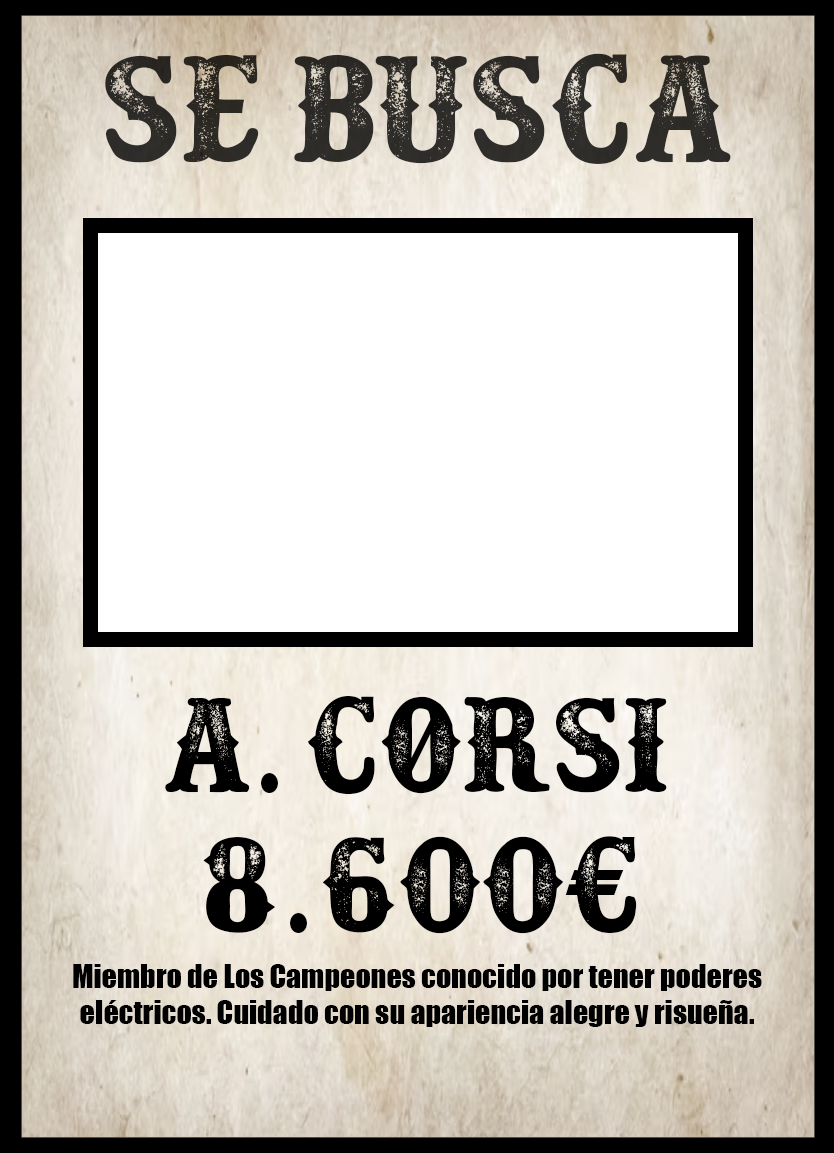
<style>
.page{position:relative;width:834px;height:1153px;background:#ffffff}
.page>*{position:absolute;margin:0}
.t1{font:170px "Docktrin";color:#2d2b28}
.t2{font:150px/140px "Docktrin";color:#000000}
.t3{font:30px "Impact";color:#000000}
</style>
<div class="page">
<p class="t1" style="left:105px;top:53px;width:626px;height:111px">se busca</p>
<p class="t2" style="left:165px;top:696px;width:502px;height:238px;text-align:center">A. COrsi<br>8.600€</p>
<p class="t3" style="left:73px;top:964px;width:689px;height:63px;text-align:center">Miembro de Los Campeones conocido por tener poderes<br>eléctricos. Cuidado con su apariencia alegre y risueña.</p>
</div>
